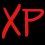
<style>
.page{position:relative;width:45px;height:45px;background:#000000}
.page>*{position:absolute;margin:0}
.t1{font:39px "SketchFlowPrint";color:#dd1b1b;font-weight:bold;scale:0.86 1}
</style>
<div class="page">
<p class="t1" style="left:2px;top:4px;width:42px;height:35px">XP</p>
</div>
